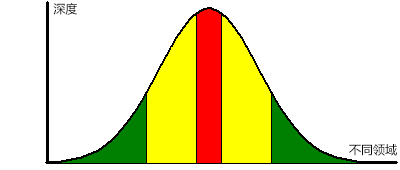
<style>
.page{position:relative;width:400px;height:170px;background:#ffffff}
.page>*{position:absolute;margin:0}
.t1{font:12px "MicrosoftYaHei";color:#000000}
</style>
<div class="page">
<p class="t1" style="left:53px;top:2px;width:24px;height:13px">深度</p>
<p class="t1" style="left:349px;top:144px;width:48px;height:12px">不同领域</p>
</div>
